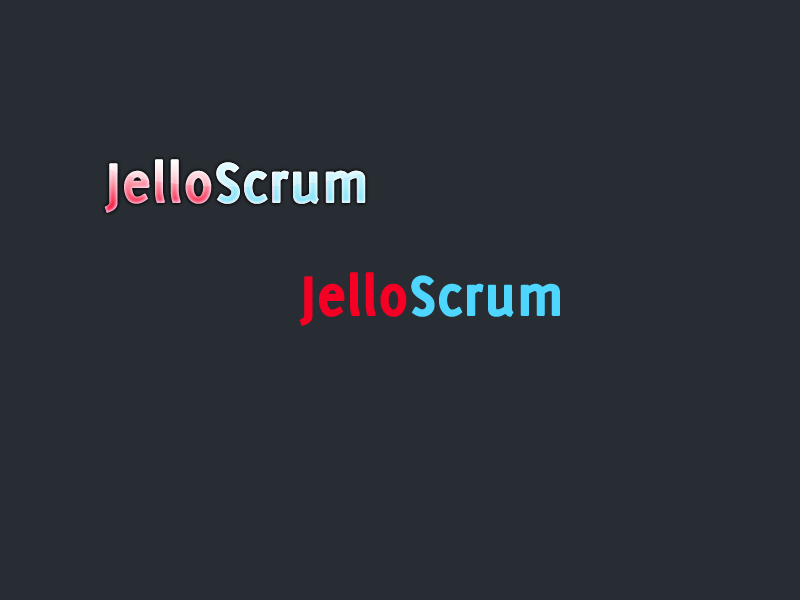
<style>
.page{position:relative;width:800px;height:600px;background:#272d32}
.page>*{position:absolute;margin:0}
.t1{font:60px "Delicious-Bold";font-weight:bold}
.t2{font:60px "Delicious-Bold";color:#f50024;font-weight:bold}
.t3{font:60px "Delicious-Bold";color:#4ed6fe;font-weight:bold}
</style>
<div class="page">
<p class="t1" style="left:104px;top:159px;width:261px;height:54px">JelloScrum</p>
<p class="t1" style="left:216px;top:162px;width:150px;height:42px">Scrum</p>
<p class="t2" style="left:299px;top:272px;width:261px;height:54px">Jello<span class="t3">Scrum</span></p>
</div>
